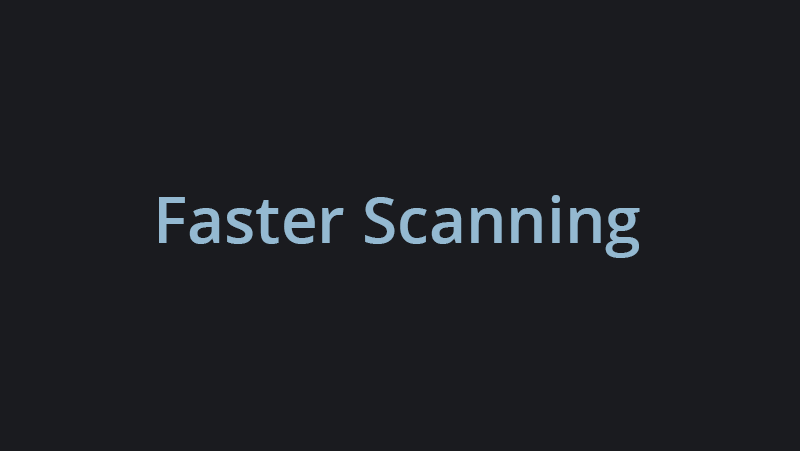
<style>
.page{position:relative;width:800px;height:451px;background:#1a1b1f}
.page>*{position:absolute;margin:0}
.t1{font:64px "OpenSans-Semibold";color:#94b9d1}
</style>
<div class="page">
<p class="t1" style="left:159px;top:195px;width:481px;height:63px">Faster Scanning</p>
</div>
